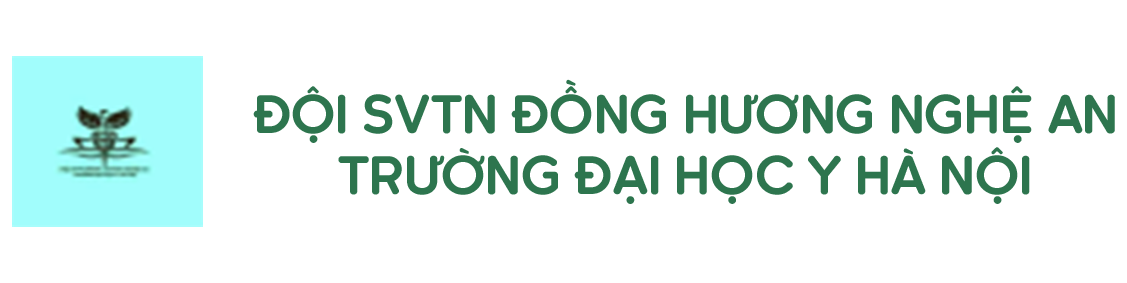
<style>
.page{position:relative;width:1127px;height:283px;background:#ffffff}
.page>*{position:absolute;margin:0}
.t1{font:50.5px "#9Slide03Kaleko105Round-Bold";color:#2d754e}
</style>
<div class="page">
<p class="t1" style="left:253px;top:79px;width:862px;height:125px;text-align:center">ĐỘI SVTN ĐỒNG HƯƠNG NGHỆ AN<br>TRƯỜNG ĐẠI HỌC Y HÀ NỘI</p>
</div>
